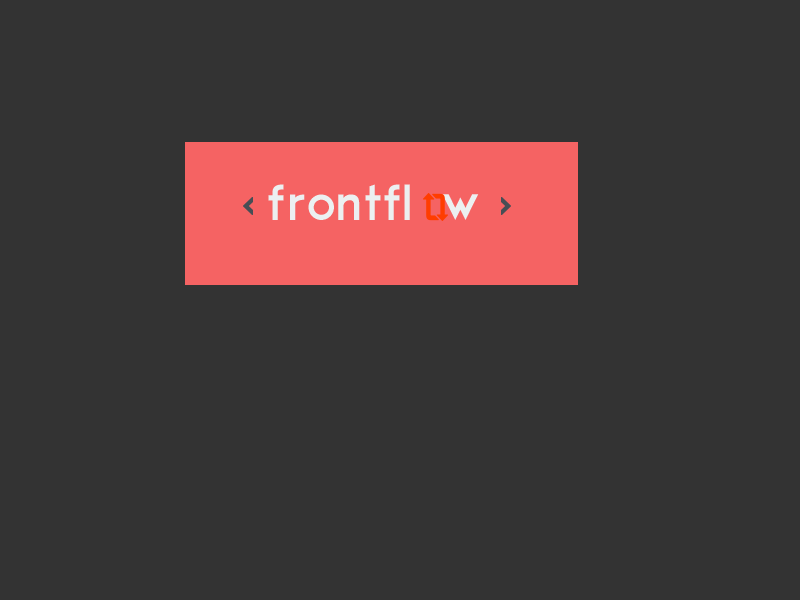
<style>
.page{position:relative;width:800px;height:600px;background:#333333}
.page>*{position:absolute;margin:0}
.t1{font:48px "ModernGrotesk";letter-spacing:-0.025em;color:#ecf0f1}
</style>
<div class="page">
<p class="t1" style="left:268px;top:184px;width:211px;height:36px">frontfl w</p>
</div>
